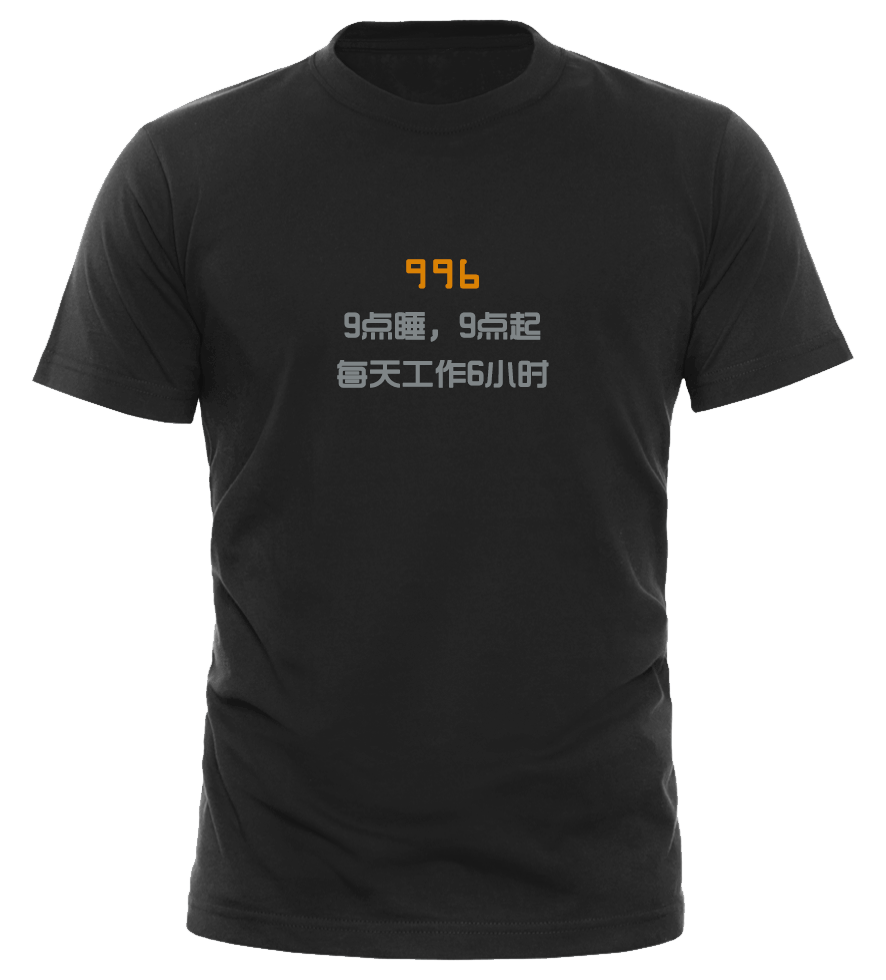
<style>
.page{position:relative;width:886px;height:980px;background:#ffffff}
.page>*{position:absolute;margin:0}
.t1{font:32px/48px "TRENDS";color:#7f8587;font-weight:bold}
.t2{font:36px/48px "OCRAStd";color:#d98104;font-weight:bold}
</style>
<div class="page">
<p class="t1" style="left:337px;top:259px;width:212px;height:129px;text-align:center"><span class="t2">996<br></span>9点睡，9点起<br>每天工作6小时</p>
</div>
